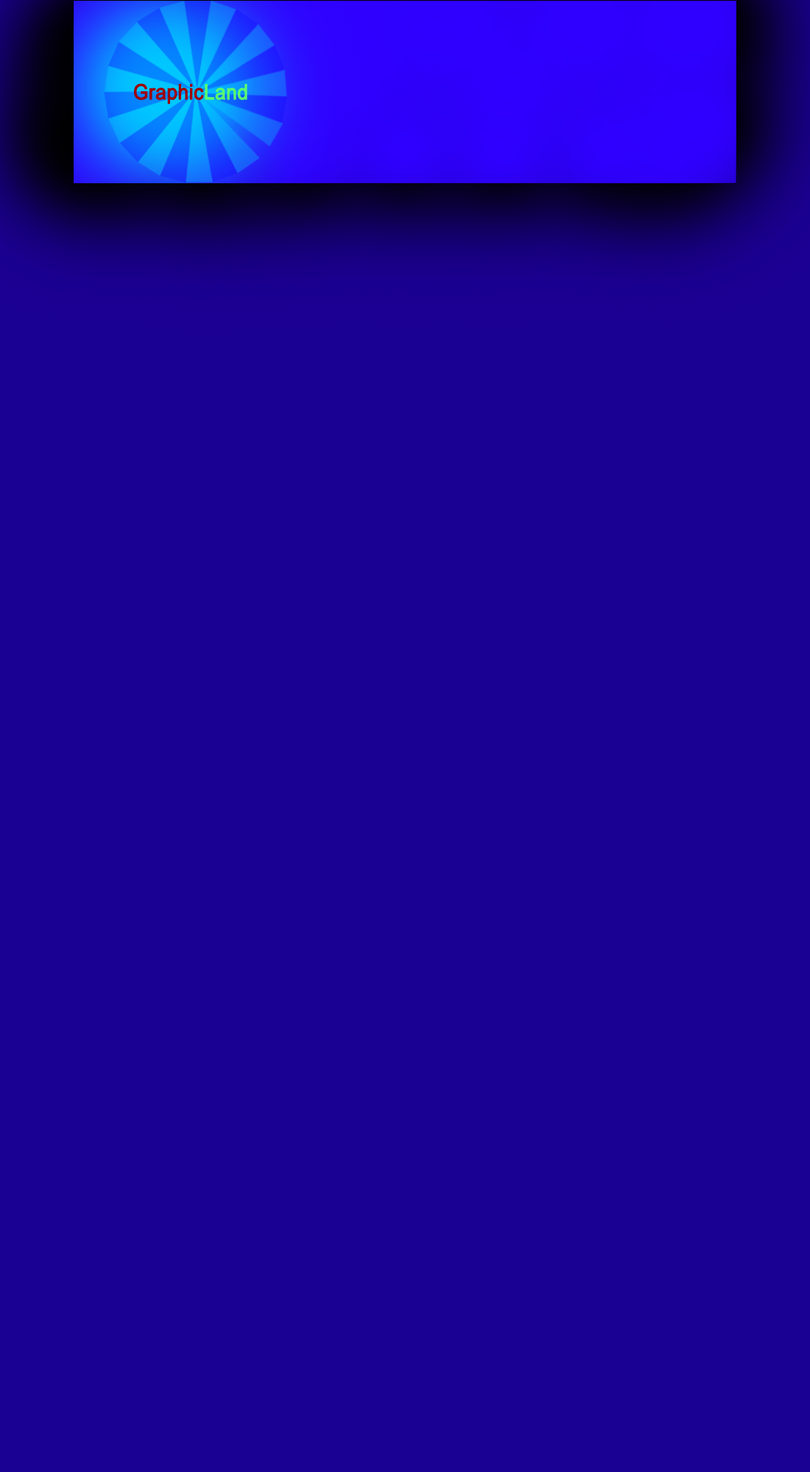
<style>
.page{position:relative;width:810px;height:1472px;background:#1b0094}
.page>*{position:absolute;margin:0}
.t1{font:21.1px "ArialMT";color:#9e0000;font-weight:bold;scale:0.91 1}
.t2{font:21.1px "ArialMT";color:#5aff6d;font-weight:bold;scale:0.91 1}
</style>
<div class="page">
<p class="t1" style="left:134px;top:83px;width:113px;height:22px">Graphic<span class="t2">Land</span></p>
</div>
